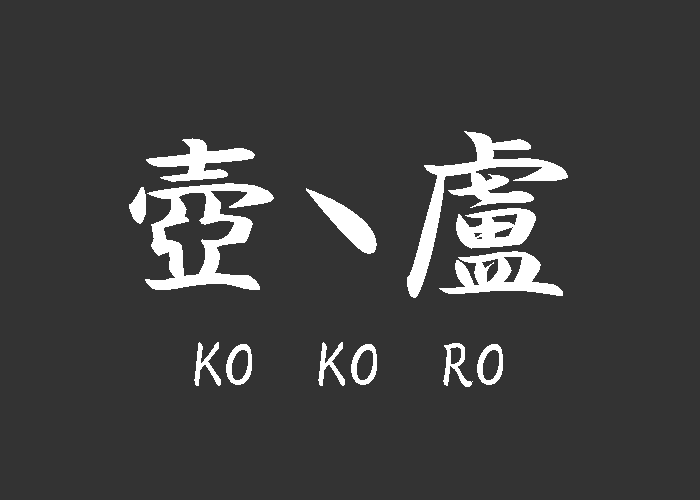
<style>
.page{position:relative;width:700px;height:500px;background:#333333}
.page>*{position:absolute;margin:0}
.t1{font:187.8px "HGPGyoshotai";color:#ffffff}
.t2{font:61.2px "HGPGyoshotai";color:#ffffff}
</style>
<div class="page">
<p class="t1" style="left:129px;top:131px;width:439px;height:167px">壺ヽ盧</p>
<p class="t2" style="left:194px;top:342px;width:309px;height:45px">KO   KO   RO</p>
</div>
